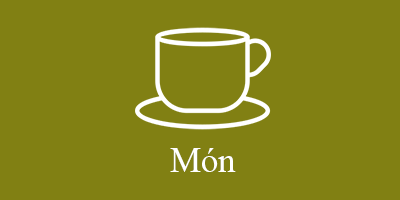
<style>
.page{position:relative;width:400px;height:200px;background:#818013}
.page>*{position:absolute;margin:0}
.t1{font:34.5px "TimesNewRomanPSMT";color:#ffffff}
</style>
<div class="page">
<p class="t1" style="left:170px;top:148px;width:66px;height:24px">Món</p>
</div>
